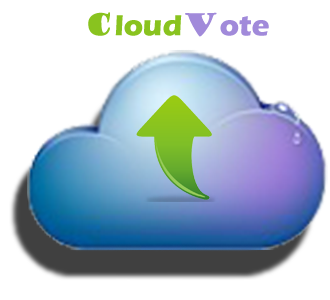
<style>
.page{position:relative;width:330px;height:300px;background:#ffffff}
.page>*{position:absolute;margin:0}
.t1{font:30px "ErasITC-Bold";color:#89c31f}
.t2{font:30px "GoudyStout";color:#89c31f}
.t3{font:30px "GoudyStout";color:#a18ada}
.t4{font:30px "ErasITC-Bold";color:#a18ada}
</style>
<div class="page">
<p class="t1" style="left:88px;top:12px;width:181px;height:25px"><span class="t2">C</span>loud<span class="t3">V</span><span class="t4">ote</span></p>
</div>
